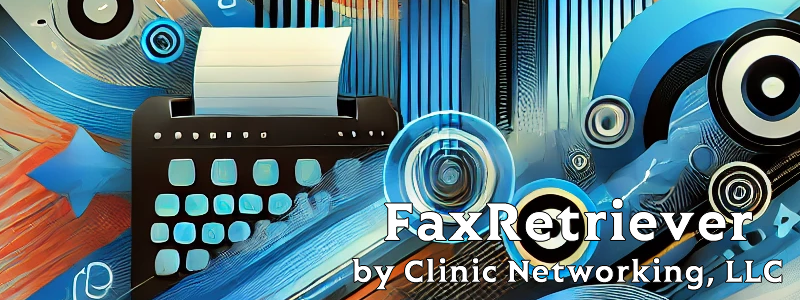
<style>
.page{position:relative;width:800px;height:300px}
.page>*{position:absolute;margin:0}
.t1{font:35px "Lovato-Bold";color:#ffffff;font-weight:bold}
.t2{font:60px "Lovato-Bold";color:#ffffff;font-weight:bold}
</style>
<div class="page">
<p class="t1" style="left:352px;top:198px;width:430px;height:92px;text-align:center"><span class="t2">FaxRetriever<br></span>by Clinic Networking, LLC</p>
</div>
